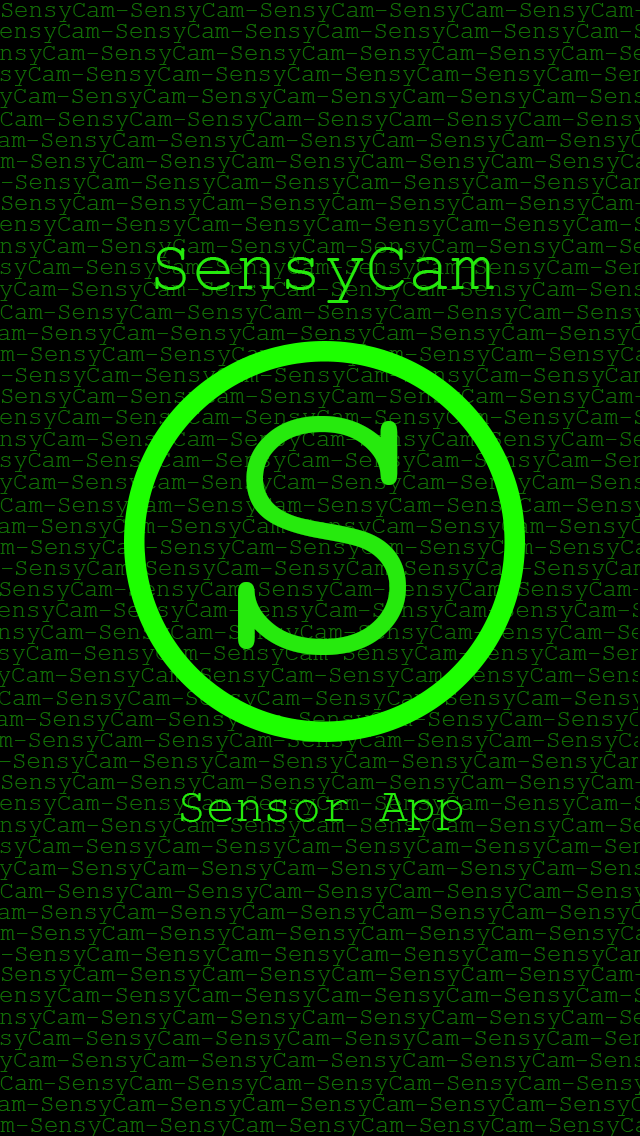
<style>
.page{position:relative;width:640px;height:1136px;background:#000000}
.page>*{position:absolute;margin:0}
.t1{font:72px "CourierNewPSMT";color:#26ea0d}
.t2{font:400px "CourierNewPSMT";color:#26ea0d}
.t3{font:48px "CourierNewPSMT";color:#26ea0d}
</style>
<div class="page">
<p class="t1" style="left:155px;top:247px;width:339px;height:56px">SensyCam</p>
<p class="t2" style="left:238px;top:416px;width:168px;height:239px">S</p>
<p class="t3" style="left:181px;top:793px;width:282px;height:37px">Sensor App</p>
</div>
